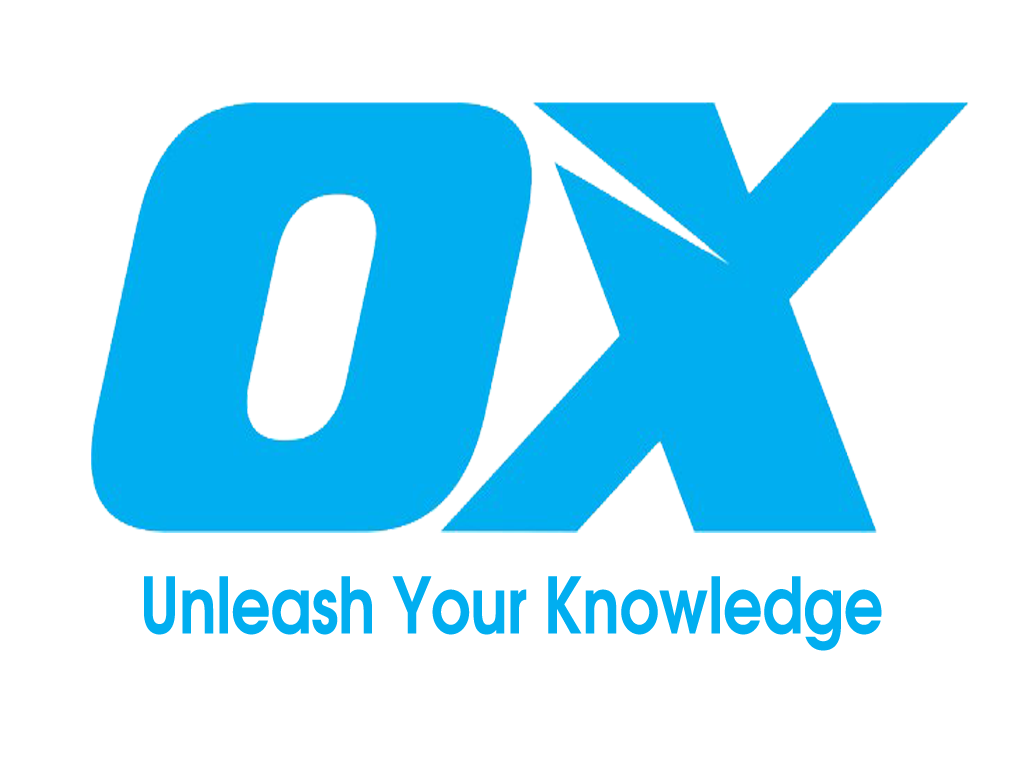
<style>
.page{position:relative;width:1024px;height:768px;background:#ffffff}
.page>*{position:absolute;margin:0}
.t1{font:77px "TeXGyreAdventor-Bold";color:#01aef0;scale:0.8 1}
</style>
<div class="page">
<p class="t1" style="left:144px;top:576px;width:738px;height:75px">Unleash Your Knowledge</p>
</div>
